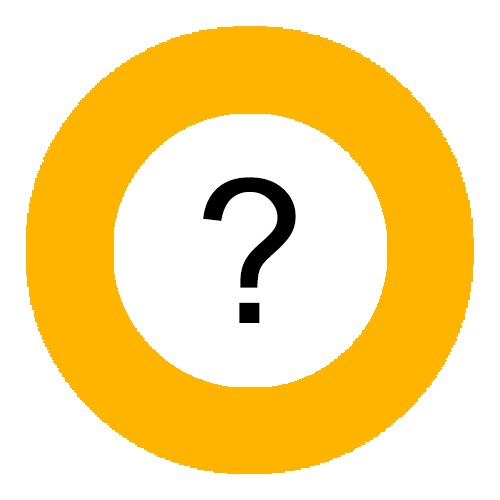
<style>
.page{position:relative;width:500px;height:500px;background:#ffffff}
.page>*{position:absolute;margin:0}
.t1{font:200px "ArialMT";color:#000000}
</style>
<div class="page">
<p class="t1" style="left:203px;top:177px;width:93px;height:146px">?</p>
</div>
